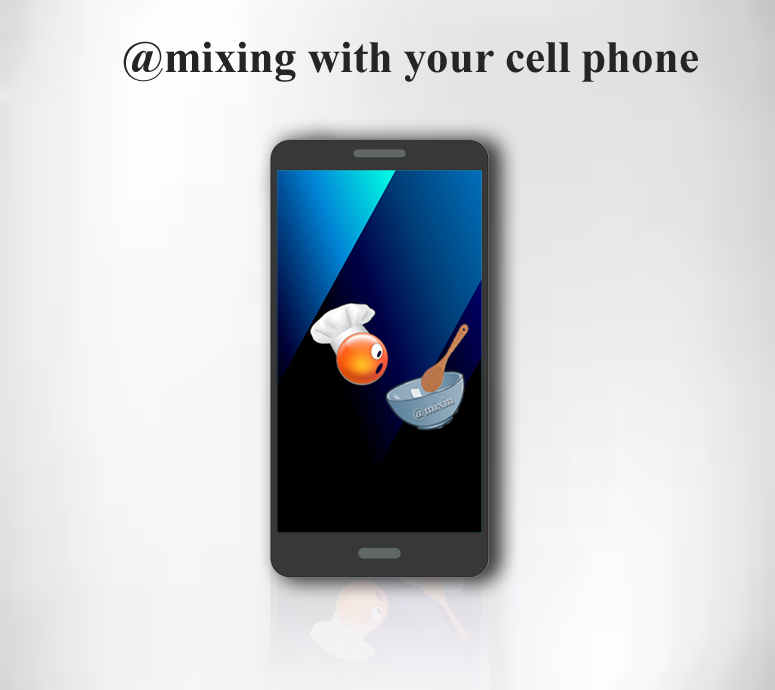
<style>
.page{position:relative;width:775px;height:690px}
.page>*{position:absolute;margin:0}
.t1{font:45px "TimesNewRomanPS-BoldMT";color:#252525}
</style>
<div class="page">
<p class="t1" style="left:123px;top:41px;width:575px;height:41px">@mixing with your cell phone</p>
</div>
